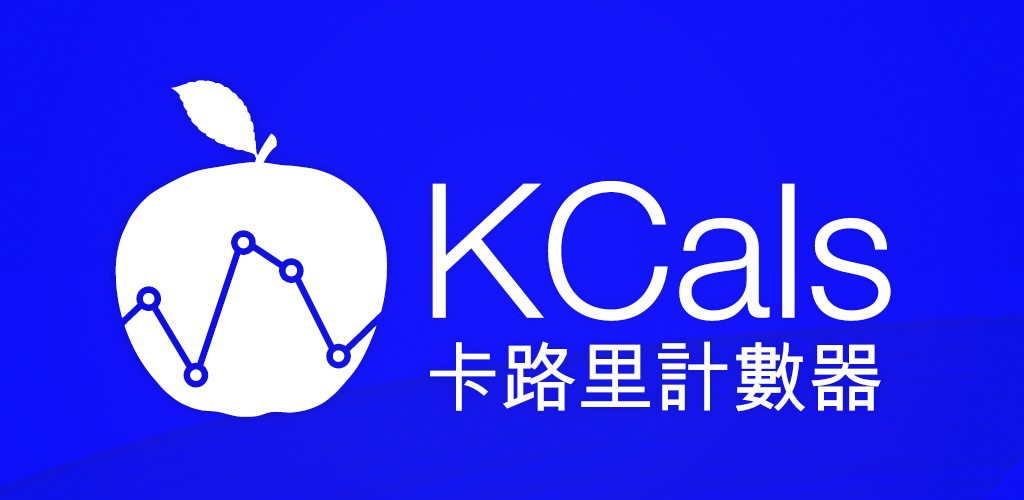
<style>
.page{position:relative;width:1024px;height:500px}
.page>*{position:absolute;margin:0}
.t1{font:434px "kcal";color:#fefefe}
.t2{font:187.5px "HelveticaNeueLTStd-Lt";color:#ffffff}
.t3{font:76.6px "ArialUnicodeMS";color:#ffffff}
</style>
<div class="page">
<p class="t1" style="left:115px;top:80px;width:272px;height:337px">k</p>
<p class="t2" style="left:432px;top:181px;width:459px;height:140px">KCals</p>
<p class="t3" style="left:430px;top:341px;width:451px;height:71px">卡路里計數器</p>
</div>
